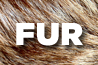
<style>
.page{position:relative;width:98px;height:65px}
.page>*{position:absolute;margin:0}
.t1{font:31.3px "Gotham-Ultra";letter-spacing:0.025em;color:#ffffff}
</style>
<div class="page">
<p class="t1" style="left:16px;top:23px;width:67px;height:23px">FUR</p>
</div>
